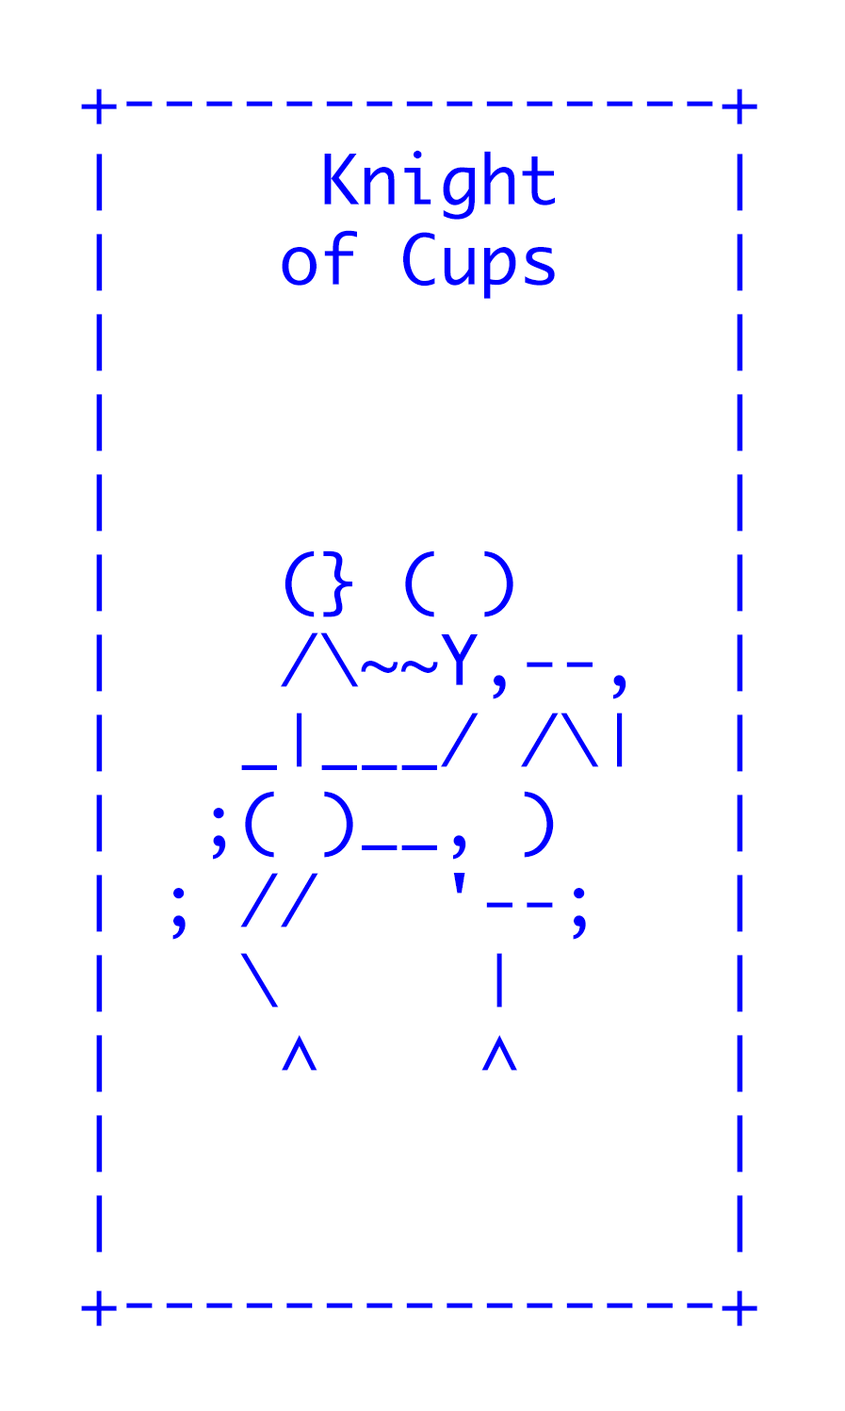
<style>
.page{position:relative;width:845px;height:1411px;background:#ffffff}
.page>*{position:absolute;margin:0}
.t1{font:66.7px "Monaco";color:#0000ff}
</style>
<div class="page">
<p class="t1" style="left:81px;top:89px;width:677px;height:1237px">+---------------+<br>│     Knight    │<br>│    of Cups    │<br>│               │<br>│               │<br>│               │<br>│    (} ( )     │<br>│    /\~~Y,--,  │ <br>│   _|___/ /\|  │ <br>│  ;( )__, )    │ <br>│ ; //   '--;   │ <br>│   \     |     │ <br>│    ^    ^     │ <br>│               │<br>│               │<br>+---------------+</p>
</div>
